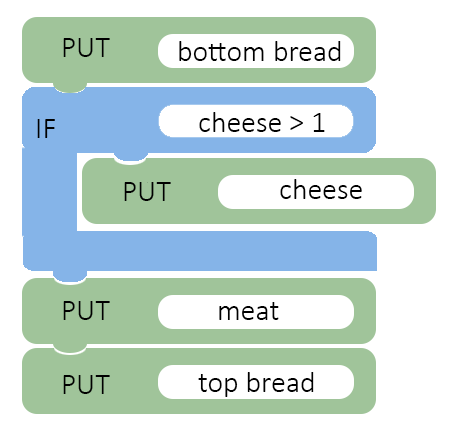
<style>
.page{position:relative;width:456px;height:440px;background:#ffffff}
.page>*{position:absolute;margin:0}
.t1{font:30px "Calibri-Light";color:#000000}
</style>
<div class="page">
<p class="t1" style="left:63px;top:38px;width:47px;height:19px">PUT</p>
<p class="t1" style="left:179px;top:41px;width:162px;height:20px">bottom bread</p>
<p class="t1" style="left:199px;top:112px;width:126px;height:20px">cheese &gt; 1</p>
<p class="t1" style="left:37px;top:119px;width:18px;height:19px">IF</p>
<p class="t1" style="left:124px;top:182px;width:47px;height:19px">PUT</p>
<p class="t1" style="left:280px;top:179px;width:82px;height:20px">cheese</p>
<p class="t1" style="left:63px;top:301px;width:47px;height:19px">PUT</p>
<p class="t1" style="left:219px;top:302px;width:60px;height:18px">meat</p>
<p class="t1" style="left:63px;top:375px;width:47px;height:19px">PUT</p>
<p class="t1" style="left:198px;top:372px;width:116px;height:25px">top bread</p>
</div>
